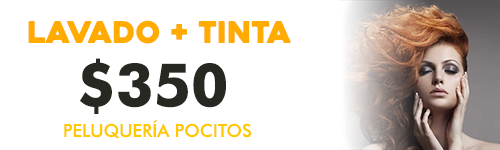
<style>
.page{position:relative;width:500px;height:150px;background:#ffffff}
.page>*{position:absolute;margin:0}
.t1{font:29.7px "Heavitas";color:#ffab00}
.t2{font:59.4px "FuturaBT-Bold";color:#272822}
.t3{font:17.8px "FuturaBT-Medium";color:#fec901}
</style>
<div class="page">
<p class="t1" style="left:28px;top:20px;width:263px;height:24px">lAVADO + TINTA</p>
<p class="t2" style="left:80px;top:58px;width:146px;height:56px">$350</p>
<p class="t3" style="left:64px;top:120px;width:188px;height:19px">PELUQUERÍA POCITOS</p>
</div>
